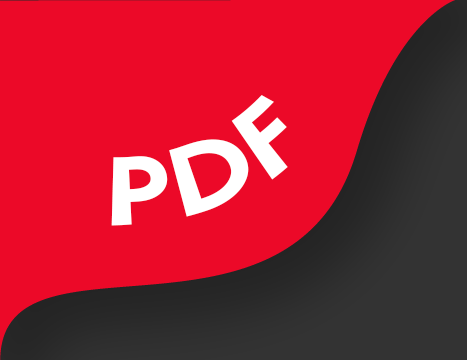
<style>
.page{position:relative;width:467px;height:360px;background:#ec0928}
.page>*{position:absolute;margin:0}
.t1{font:100px "KabelITCbyBT-Demi";color:#ffffff}
</style>
<div class="page">
<p class="t1" style="left:111px;top:95px;width:177px;height:131px;rotate:-22deg">PDF</p>
</div>
